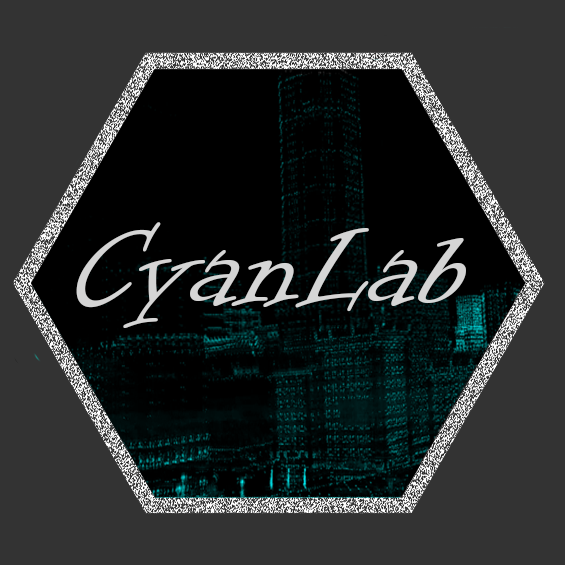
<style>
.page{position:relative;width:565px;height:565px;background:#333333}
.page>*{position:absolute;margin:0}
.t1{font:128px "InformalRoman-Regular";color:#d5d5d5}
</style>
<div class="page">
<p class="t1" style="left:76px;top:222px;width:390px;height:106px">CyanLab</p>
</div>
